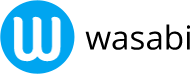
<style>
.page{position:relative;width:190px;height:74px;background:#ffffff}
.page>*{position:absolute;margin:0}
.t1{font:32.9px "OpenSans";color:#000000}
</style>
<div class="page">
<p class="t1" style="left:85px;top:24px;width:105px;height:26px">wasabi</p>
</div>
